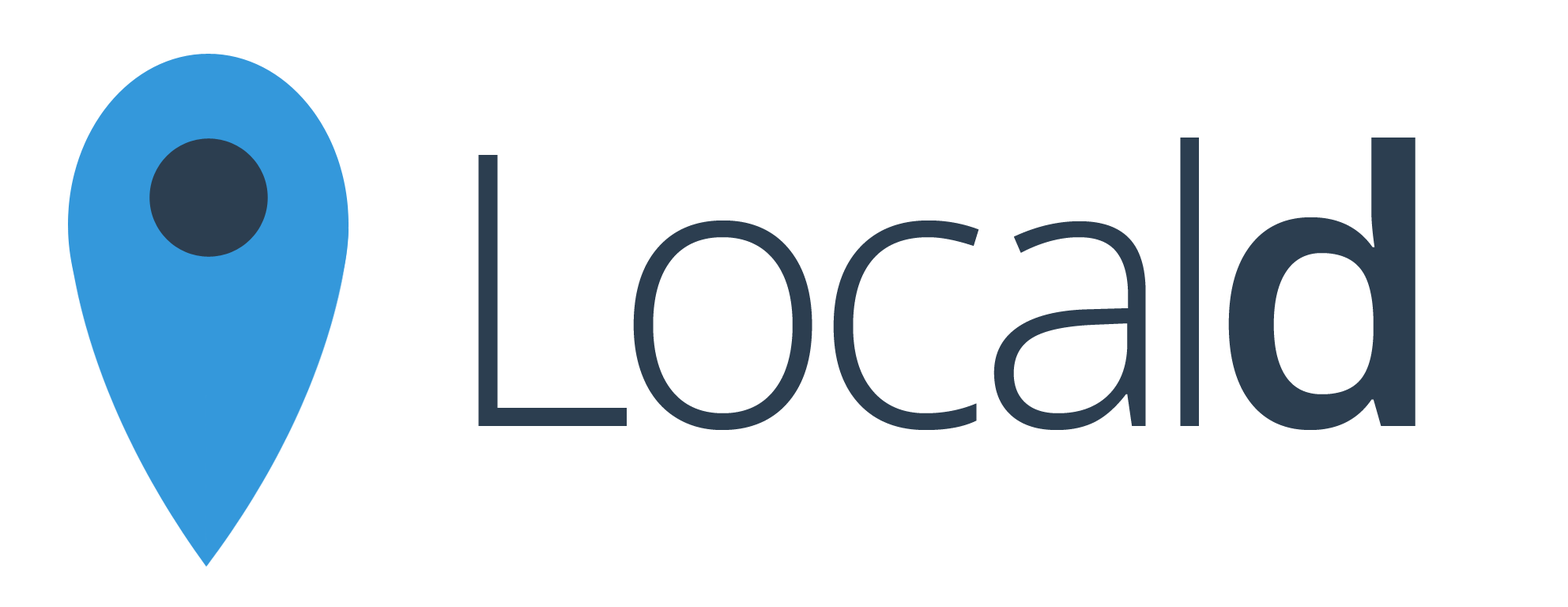
<style>
.page{position:relative;width:1568px;height:607px;background:#ffffff}
.page>*{position:absolute;margin:0}
.t1{font:379.3px "OpenSans-Light";color:#2c3e50}
.t2{font:379.3px "OpenSans-Semibold";color:#2c3e50}
</style>
<div class="page">
<p class="t1" style="left:478px;top:138px;width:937px;height:292px">Local<span class="t2">d</span></p>
</div>
